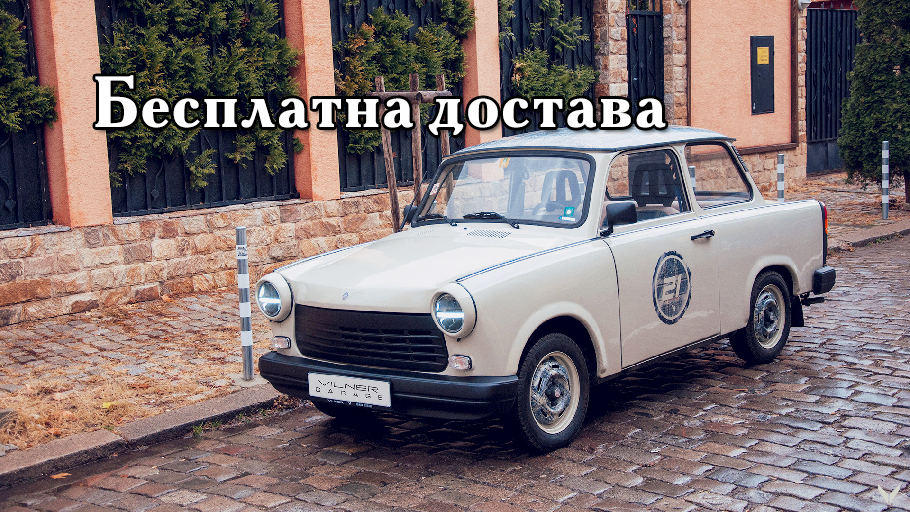
<style>
.page{position:relative;width:910px;height:512px}
.page>*{position:absolute;margin:0}
.t1{font:72px "AkademieAlte";color:#fefefe}
</style>
<div class="page">
<p class="t1" style="left:95px;top:75px;width:571px;height:60px">Бесплатна достава</p>
</div>
